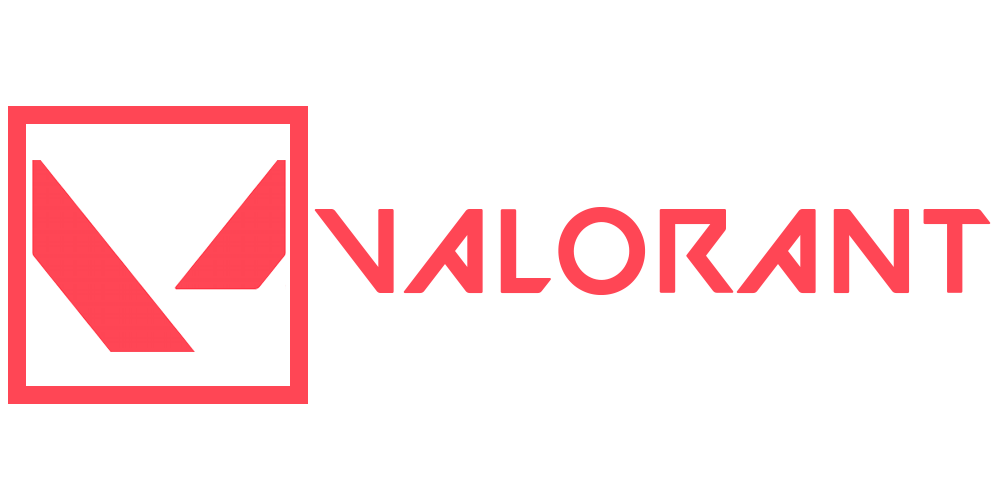
<style>
.page{position:relative;width:1000px;height:500px;background:#ffffff}
.page>*{position:absolute;margin:0}
.t1{font:120px "VALORANT-Regular";letter-spacing:0.01em;color:#ff4655}
</style>
<div class="page">
<p class="t1" style="left:314px;top:207px;width:677px;height:88px">VALORANT</p>
</div>
